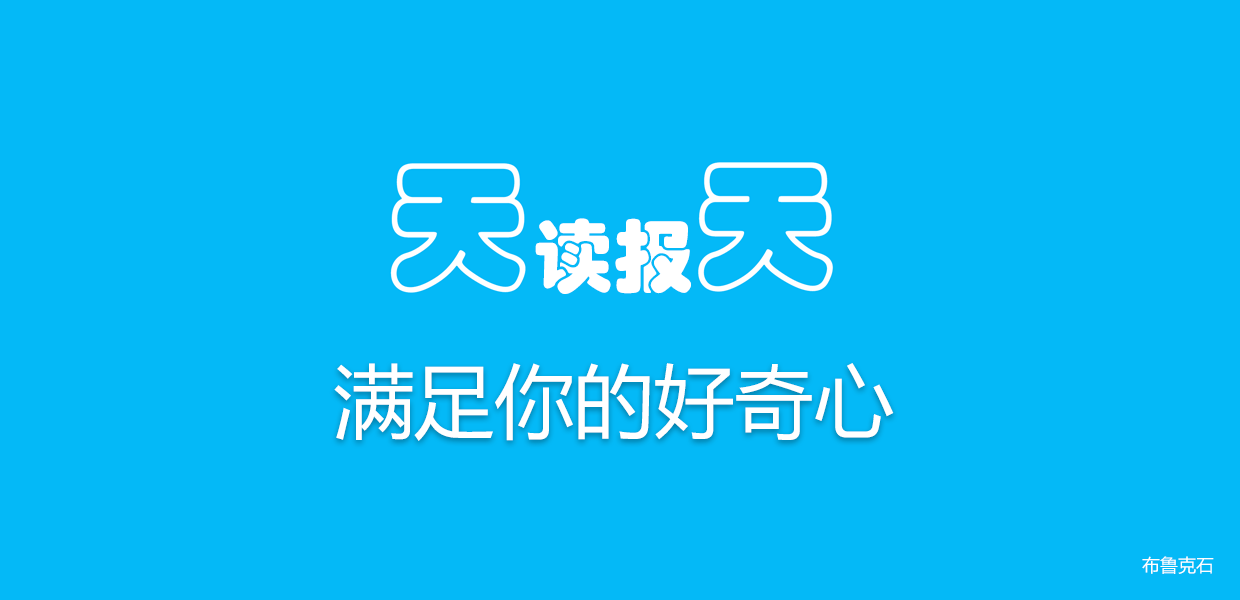
<style>
.page{position:relative;width:1240px;height:600px;background:#04b9f7}
.page>*{position:absolute;margin:0}
.t1{font:80px "STHupo";color:#ffffff}
.t2{font:80px "MicrosoftYaHei";color:#ffffff}
.t3{font:18px "MicrosoftYaHei";color:#ffffff}
</style>
<div class="page">
<p class="t1" style="left:535px;top:218px;width:156px;height:76px">读报</p>
<p class="t2" style="left:334px;top:363px;width:560px;height:78px">满足你的好奇心</p>
<p class="t3" style="left:1142px;top:556px;width:72px;height:18px">布鲁克石</p>
</div>
